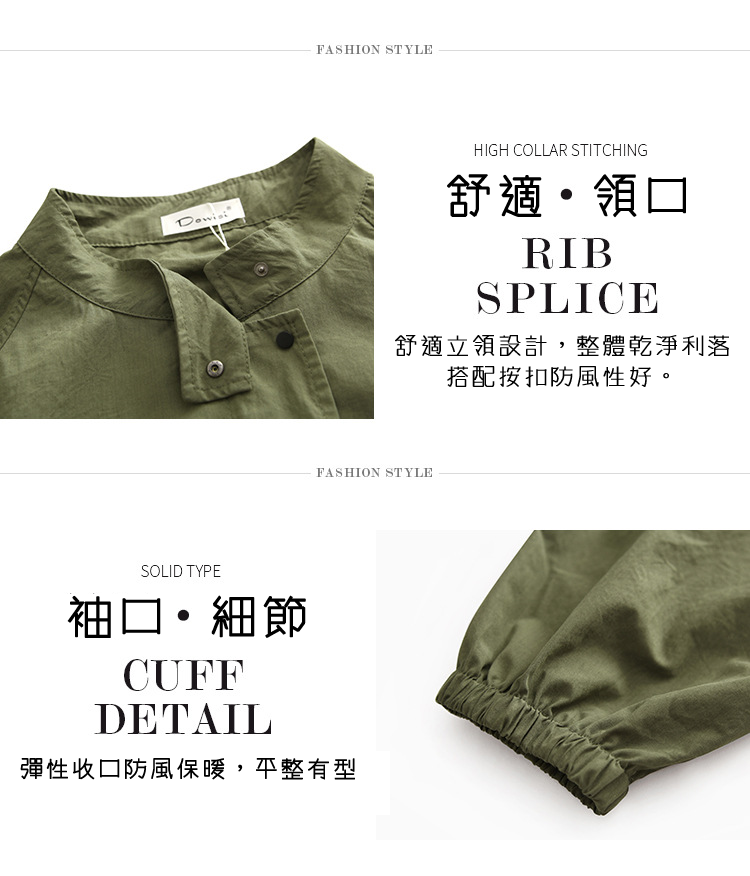
<style>
.page{position:relative;width:750px;height:876px;background:#ffffff}
.page>*{position:absolute;margin:0}
.t1{font:48px "winman-tun33014";letter-spacing:0.05em;color:#000000;font-weight:bold}
.t2{font:24px "winman-tun33014";letter-spacing:0.05em;color:#000000;font-weight:bold}
</style>
<div class="page">
<p class="t1" style="left:447px;top:174px;width:95px;height:43px">舒適</p>
<p class="t1" style="left:594px;top:174px;width:92px;height:44px">領口</p>
<p class="t2" style="left:395px;top:335px;width:334px;height:53px;text-align:center">舒適立領設計，整體乾淨利落<br>搭配按扣防風性好。</p>
<p class="t1" style="left:67px;top:595px;width:94px;height:43px">袖口</p>
<p class="t1" style="left:211px;top:595px;width:95px;height:43px">細節</p>
<p class="t2" style="left:20px;top:758px;width:335px;height:22px">彈性收口防風保暖，平整有型</p>
</div>
